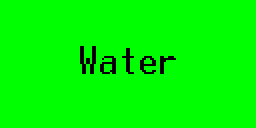
<style>
.page{position:relative;width:256px;height:128px;background:#00ff00}
.page>*{position:absolute;margin:0}
.t1{font:36px "Terminal";color:#000000}
</style>
<div class="page">
<p class="t1" style="left:80px;top:46px;width:96px;height:28px">Water</p>
</div>
